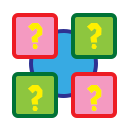
<style>
.page{position:relative;width:128px;height:128px;background:#ffffff}
.page>*{position:absolute;margin:0}
.t1{font:33.3px "SuperMarioGalaxy";color:#fff000}
</style>
<div class="page">
<p class="t1" style="left:28px;top:23px;width:15px;height:26px">?</p>
<p class="t1" style="left:87px;top:23px;width:15px;height:26px">?</p>
<p class="t1" style="left:28px;top:85px;width:15px;height:26px">?</p>
<p class="t1" style="left:87px;top:85px;width:15px;height:26px">?</p>
</div>
